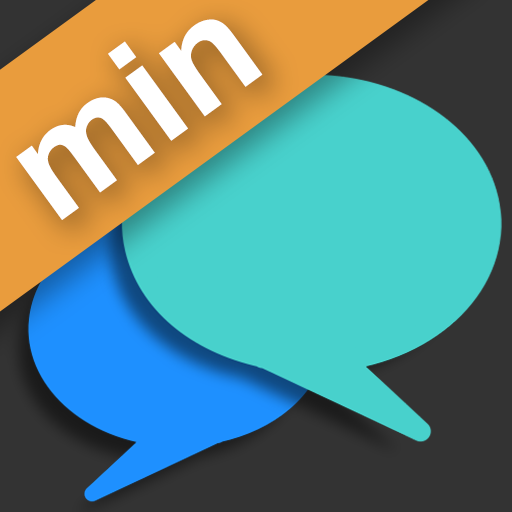
<style>
.page{position:relative;width:512px;height:512px;background:#48d1cc}
.page>*{position:absolute;margin:0}
.t1{font:150px "Arial-BoldMT";color:#ffffff}
</style>
<div class="page">
<p class="t1" style="left:16px;top:19px;width:247px;height:201px;rotate:-36deg">min</p>
</div>
